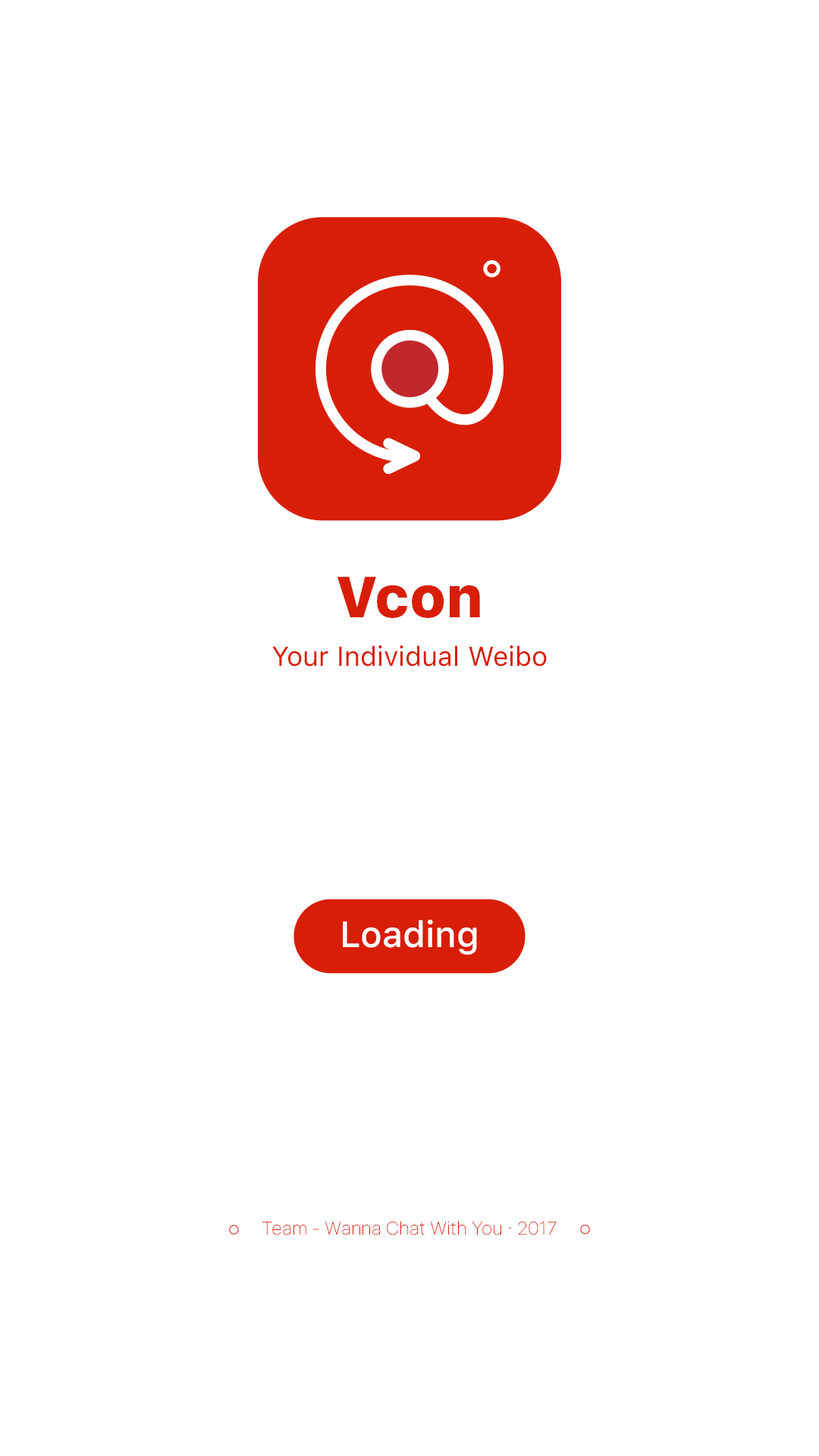
<style>
.page{position:relative;width:819px;height:1456px;background:#ffffff}
.page>*{position:absolute;margin:0}
.t1{font:57.6px "SFUIText-Heavy";color:#d81e06}
.t2{font:27.3px "SFUIText-Regular";color:#d81e06}
.t3{font:36.4px "SFUIText-Medium";color:#ffffff}
.t4{font:18.2px "SFUIText-Ultrathin";color:#d81e06}
</style>
<div class="page">
<p class="t1" style="left:337px;top:576px;width:143px;height:42px">Vcon</p>
<p class="t2" style="left:272px;top:645px;width:275px;height:22px">Your Individual Weibo</p>
<p class="t3" style="left:343px;top:919px;width:134px;height:36px">Loading</p>
<p class="t4" style="left:262px;top:1221px;width:295px;height:14px">Team - Wanna Chat With You · 2017</p>
</div>
